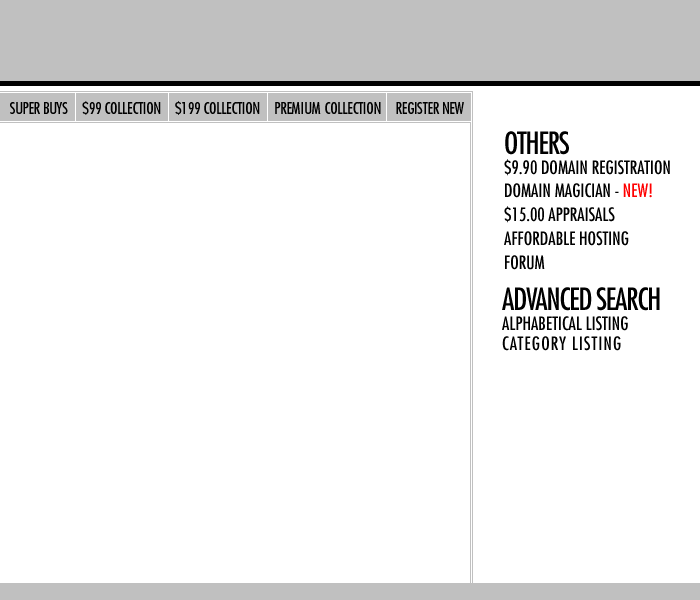
<style>
.page{position:relative;width:700px;height:600px;background:#ffffff}
.page>*{position:absolute;margin:0}
.t1{font:16px "Futura-Condensed";letter-spacing:-0.02em;color:#000000}
.t2{font:16px "Futura-Condensed";letter-spacing:0.02em;color:#000000}
.t3{font:30px "Futura-Condensed";letter-spacing:-0.04em;color:#000000}
.t4{font:18px "Futura-Condensed";color:#000000}
.t5{font:18px "Futura-Condensed";color:#ff0000}
.t6{font:18px/20px "Futura-Condensed";color:#000000}
.t7{font:30px/36px "Futura-Condensed";letter-spacing:-0.04em;color:#000000}
.t8{font:18px "Futura-Condensed";letter-spacing:0.06em;color:#000000}
</style>
<div class="page">
<p class="t1" style="left:10px;top:101px;width:454px;height:14px">SUPER BUYS     $99 COLLECTION     $199 COLLECTION     PREM<span class="t2">IUM</span> COLLECTION     REGISTER NEW</p>
<p class="t3" style="left:505px;top:131px;width:64px;height:24px">OTHERS</p>
<p class="t4" style="left:504px;top:159px;width:166px;height:17px"><span class="t3"><br></span>$9.90 DOMAIN REGISTRATION</p>
<p class="t4" style="left:505px;top:183px;width:147px;height:15px"><span class="t3"><br></span>DOMAIN MAGICIAN - <span class="t5">NEW!</span></p>
<p class="t4" style="left:504px;top:206px;width:111px;height:17px"><span class="t3"><br></span>$15.00 APPRAISALS</p>
<p class="t4" style="left:504px;top:231px;width:125px;height:15px"><span class="t3"><br></span>AFFORDABLE HOSTING</p>
<p class="t4" style="left:505px;top:255px;width:40px;height:15px"><span class="t3"><br></span>FORUM</p>
<p class="t6" style="left:502px;top:287px;width:158px;height:64px"><span class="t7">ADVANCED SEARCH<br></span>ALPHABETICAL LISTING<br><br><span class="t8">CATEGORY LISTING</span></p>
</div>
